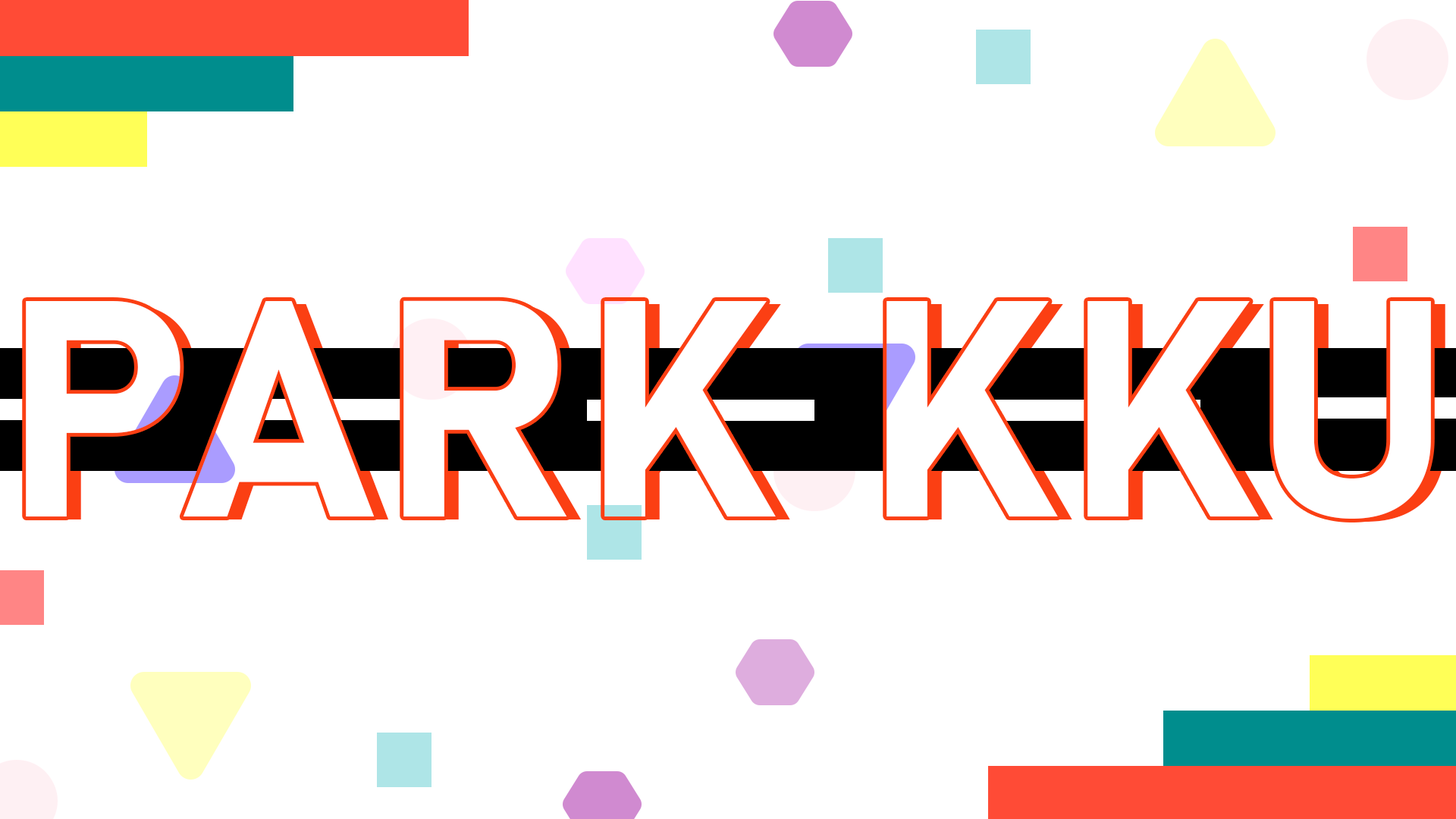
<style>
.page{position:relative;width:1456px;height:819px;background:#ffffff}
.page>*{position:absolute;margin:0}
.t1{font:303.3px "Bahnschrift-Bold";letter-spacing:0.01em;color:#ffffff}
</style>
<div class="page">
<p class="t1" style="left:26px;top:300px;width:1405px;height:219px">PARK KKU</p>
</div>
